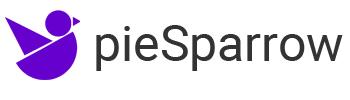
<style>
.page{position:relative;width:350px;height:100px;background:#ffffff}
.page>*{position:absolute;margin:0}
.t1{font:50px "Roboto-Regular";color:#333333}
</style>
<div class="page">
<p class="t1" style="left:96px;top:25px;width:247px;height:46px">pieSparrow</p>
</div>
